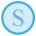
<style>
.page{position:relative;width:36px;height:36px;background:#d0eefa}
.page>*{position:absolute;margin:0}
.t1{font:24.3px "TimesNewRomanPSMT";color:#7ca4df}
</style>
<div class="page">
<p class="t1" style="left:13px;top:9px;width:11px;height:18px">S</p>
</div>
